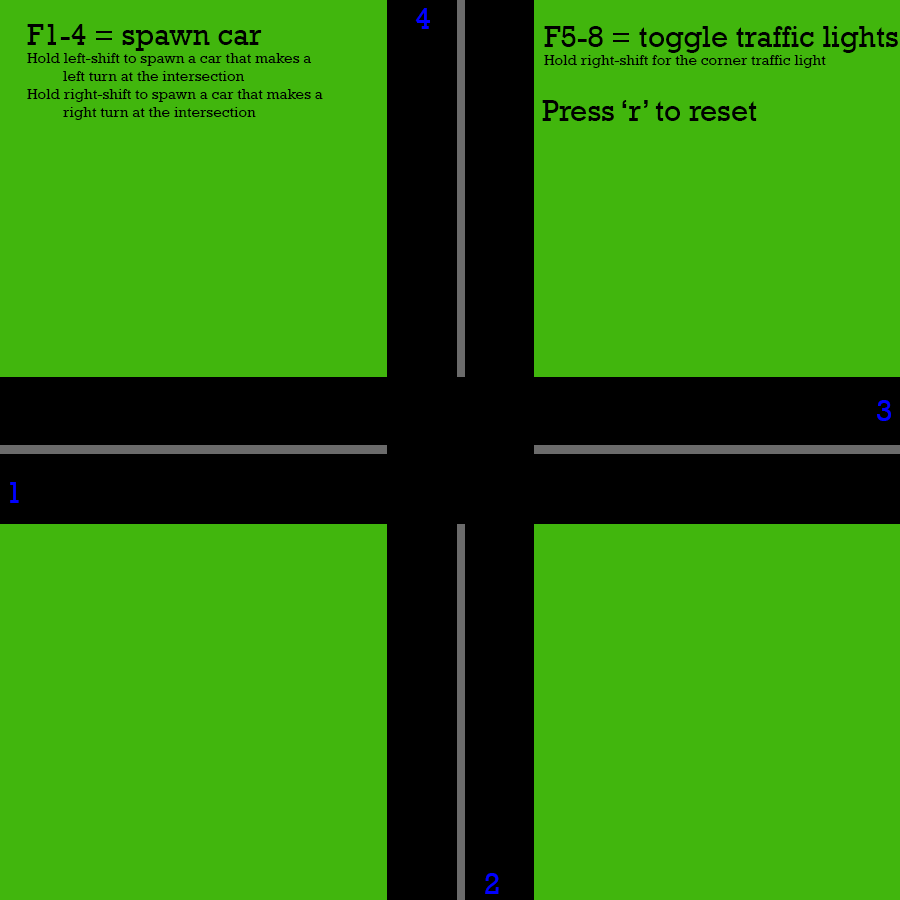
<style>
.page{position:relative;width:900px;height:900px;background:#41b60d}
.page>*{position:absolute;margin:0}
.t1{font:30px "Rockwell";color:#0000ff}
.t2{font:15px "Rockwell";color:#000000}
.t3{font:30px "Rockwell";color:#000000}
</style>
<div class="page">
<p class="t1" style="left:415px;top:8px;width:15px;height:21px">4</p>
<p class="t2" style="left:27px;top:24px;width:296px;height:96px"><span class="t3">F1-4 = spawn car<br></span>Hold left-shift to spawn a car that makes a <br> left turn at the intersection<br>Hold right-shift to spawn a car that makes a <br> right turn at the intersection</p>
<p class="t2" style="left:544px;top:26px;width:354px;height:42px"><span class="t3">F5-8 = toggle traffic lights<br></span>Hold right-shift for the corner traffic light</p>
<p class="t3" style="left:542px;top:100px;width:215px;height:21px">Press ‘r’ to reset</p>
<p class="t1" style="left:877px;top:400px;width:14px;height:21px">3</p>
<p class="t1" style="left:10px;top:482px;width:9px;height:21px">1</p>
<p class="t1" style="left:485px;top:873px;width:14px;height:21px">2</p>
</div>
